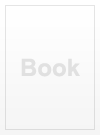
<style>
.page{position:relative;width:100px;height:135px}
.page>*{position:absolute;margin:0}
.t1{font:24px "Arial-BoldMT";color:#e1e1e1}
</style>
<div class="page">
<p class="t1" style="left:21px;top:58px;width:59px;height:19px">Book</p>
</div>
